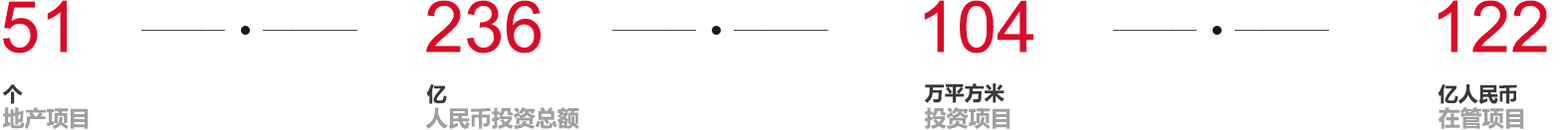
<style>
.page{position:relative;width:1568px;height:130px;background:#ffffff}
.page>*{position:absolute;margin:0}
.t1{font:71.7px "ArialMT";color:#db0a26}
.t2{font:19.9px "MicrosoftYaHei-Bold";color:#383838}
.t3{font:21.9px "MicrosoftYaHei-Bold";color:#a0a0a0}
</style>
<div class="page">
<p class="t1" style="left:3px;top:0px;width:64px;height:54px">51</p>
<p class="t1" style="left:426px;top:0px;width:115px;height:54px">236</p>
<p class="t1" style="left:924px;top:0px;width:109px;height:54px">104</p>
<p class="t1" style="left:1438px;top:0px;width:109px;height:53px">122</p>
<p class="t2" style="left:3px;top:85px;width:20px;height:20px">个</p>
<p class="t2" style="left:426px;top:85px;width:21px;height:20px">亿</p>
<p class="t2" style="left:925px;top:84px;width:80px;height:20px">万平方米</p>
<p class="t2" style="left:1438px;top:85px;width:79px;height:20px">亿人民币</p>
<p class="t3" style="left:3px;top:108px;width:86px;height:21px">地产项目</p>
<p class="t3" style="left:426px;top:108px;width:153px;height:21px">人民币投资总额</p>
<p class="t3" style="left:925px;top:108px;width:85px;height:21px">投资项目</p>
<p class="t3" style="left:1439px;top:108px;width:85px;height:21px">在管项目</p>
</div>
